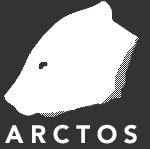
<style>
.page{position:relative;width:150px;height:149px;background:#333333}
.page>*{position:absolute;margin:0}
.t1{font:25px "AvenirLTStd-Black";letter-spacing:0.25em;color:#ffffff}
</style>
<div class="page">
<p class="t1" style="left:5px;top:124px;width:132px;height:20px">ARCTOS</p>
</div>
